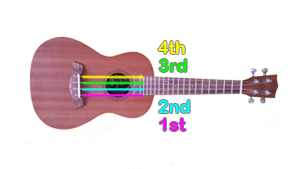
<style>
.page{position:relative;width:300px;height:169px;background:#ffffff}
.page>*{position:absolute;margin:0}
.t1{font:18px "ArialRoundedMTBold";color:#ffff00}
.t2{font:18px "ArialRoundedMTBold";color:#00ff00}
.t3{font:18px "ArialRoundedMTBold";color:#00ffff}
.t4{font:18px "ArialRoundedMTBold";color:#ff00ff}
</style>
<div class="page">
<p class="t1" style="left:158px;top:41px;width:27px;height:13px">4th</p>
<p class="t2" style="left:159px;top:59px;width:28px;height:13px">3rd</p>
<p class="t3" style="left:159px;top:100px;width:31px;height:13px">2nd</p>
<p class="t4" style="left:159px;top:118px;width:27px;height:13px">1st</p>
</div>
